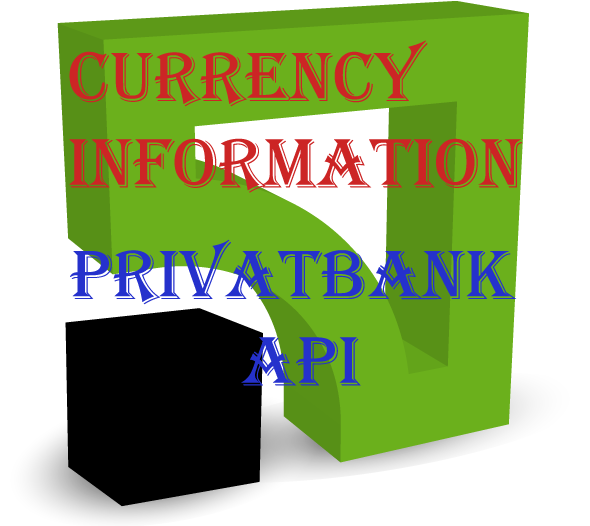
<style>
.page{position:relative;width:590px;height:526px;background:#ffffff}
.page>*{position:absolute;margin:0}
.t1{font:72px "Algerian";color:#cc2525}
.t2{font:72px "Algerian";color:#2531cc}
</style>
<div class="page">
<p class="t1" style="left:69px;top:40px;width:454px;height:153px">Currency <br> InFORMATION</p>
<p class="t2" style="left:70px;top:239px;width:447px;height:147px;text-align:center">PriVATBANK <br>API</p>
</div>
